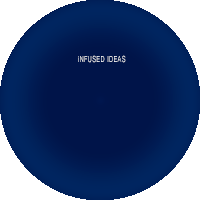
<style>
.page{position:relative;width:200px;height:200px;background:#001449}
.page>*{position:absolute;margin:0}
.t1{font:9.2px "Gautami";letter-spacing:0.075em;color:#ffffff;scale:0.64 1}
</style>
<div class="page">
<p class="t1" style="left:78px;top:55px;width:48px;height:8px">iNFUSED IDEAS</p>
</div>
